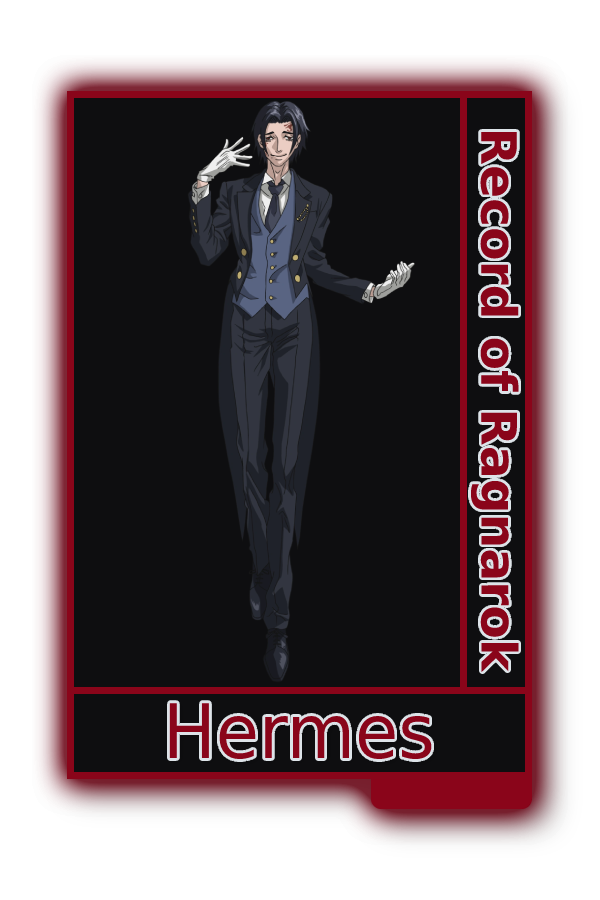
<style>
.page{position:relative;width:600px;height:900px;background:#0e0e10}
.page>*{position:absolute;margin:0}
.t1{font:48.8px "MADETOMMY-Bold";color:#8a051a}
.t2{font:75px "CoolveticaRg-Regular";color:#8a051a;scale:0.94 1}
</style>
<div class="page">
<p class="t1" style="left:470px;top:131px;width:49px;height:542px;rotate:90deg">Record of Ragnarok</p>
<p class="t2" style="left:169px;top:703px;width:263px;height:57px">Hermes</p>
</div>
